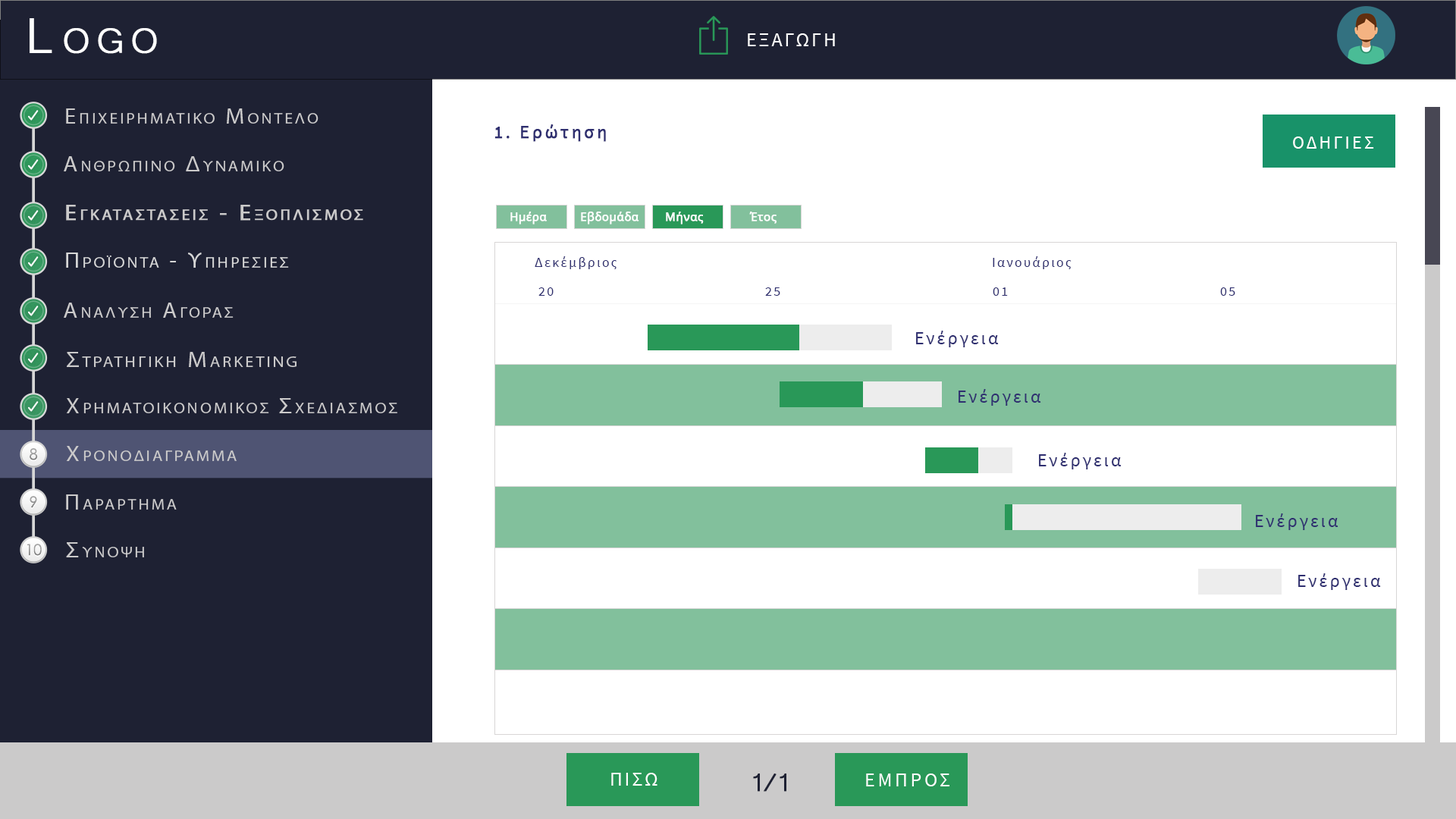
<style>
.page{position:relative;width:1456px;height:819px;background:#ffffff}
.page>*{position:absolute;margin:0}
.t1{font:63.7px "Microsoft-Yi-Baiti";letter-spacing:0.13em;color:#ffffff;font-variant:small-caps;font-weight:bold}
.t2{font:20px "SourceSansPro-Regular";letter-spacing:0.1em;color:#fefefe;text-transform:uppercase}
.t3{font:18.2px "SourceSansPro-Regular";letter-spacing:0.13em;color:#2f2f70;font-weight:bold}
.t4{font:18.2px "SourceSansPro-Regular";letter-spacing:0.13em;color:#2f2f70;text-transform:uppercase;font-weight:bold}
.t5{font:18.2px "SourceSansPro-Regular";letter-spacing:0.13em;color:#ffffff;text-transform:uppercase}
.t6{font:11.4px "OpenSans-Regular";letter-spacing:0.02em;color:#ffffff;font-weight:bold}
.t7{font:13.7px "SourceSansPro-Regular";letter-spacing:0.13em;color:#2f2f70}
.t8{font:18.2px "SourceSansPro-Regular";letter-spacing:0.13em;color:#2f2f70}
.t9{font:32.8px "Microsoft-Yi-Baiti";letter-spacing:-0.1em;color:#1e2133;font-weight:bold}
.t10{font:20px "SourceSansPro-Regular";letter-spacing:0.13em;color:#fefefe;text-transform:uppercase}
</style>
<div class="page">
<p class="t1" style="left:30px;top:18px;width:127px;height:36px">Logo</p>
<p class="t2" style="left:748px;top:33px;width:87px;height:13px">εξαγωγη</p>
<p class="t3" style="left:494px;top:124px;width:112px;height:18px"><span class="t4">1. </span>Ερώτηση</p>
<p class="t5" style="left:1293px;top:136px;width:81px;height:13px">Οδηγιεσ</p>
<p class="t6" style="left:510px;top:212px;width:37px;height:12px">Ημέρα</p>
<p class="t6" style="left:581px;top:212px;width:58px;height:12px">Εβδομάδα</p>
<p class="t6" style="left:666px;top:212px;width:38px;height:12px">Μήνας</p>
<p class="t6" style="left:749px;top:212px;width:28px;height:12px">Έτος</p>
<p class="t7" style="left:535px;top:256px;width:82px;height:13px">Δεκέμβριος</p>
<p class="t7" style="left:993px;top:256px;width:79px;height:13px">Ιανουάριος</p>
<p class="t7" style="left:538px;top:287px;width:16px;height:9px">20</p>
<p class="t7" style="left:765px;top:287px;width:15px;height:9px">25</p>
<p class="t7" style="left:993px;top:287px;width:15px;height:9px">01</p>
<p class="t7" style="left:1220px;top:287px;width:15px;height:9px">05</p>
<p class="t8" style="left:916px;top:331px;width:83px;height:16px">Ενέργεια</p>
<p class="t8" style="left:959px;top:389px;width:82px;height:17px">Ενέργεια</p>
<p class="t8" style="left:1039px;top:453px;width:83px;height:16px">Ενέργεια</p>
<p class="t8" style="left:1256px;top:513px;width:82px;height:17px">Ενέργεια</p>
<p class="t8" style="left:1298px;top:573px;width:83px;height:17px">Ενέργεια</p>
<p class="t2" style="left:611px;top:773px;width:46px;height:13px">Πισω</p>
<p class="t9" style="left:753px;top:773px;width:33px;height:19px">1/1</p>
<p class="t10" style="left:866px;top:773px;width:83px;height:13px">εμπροσ</p>
</div>
